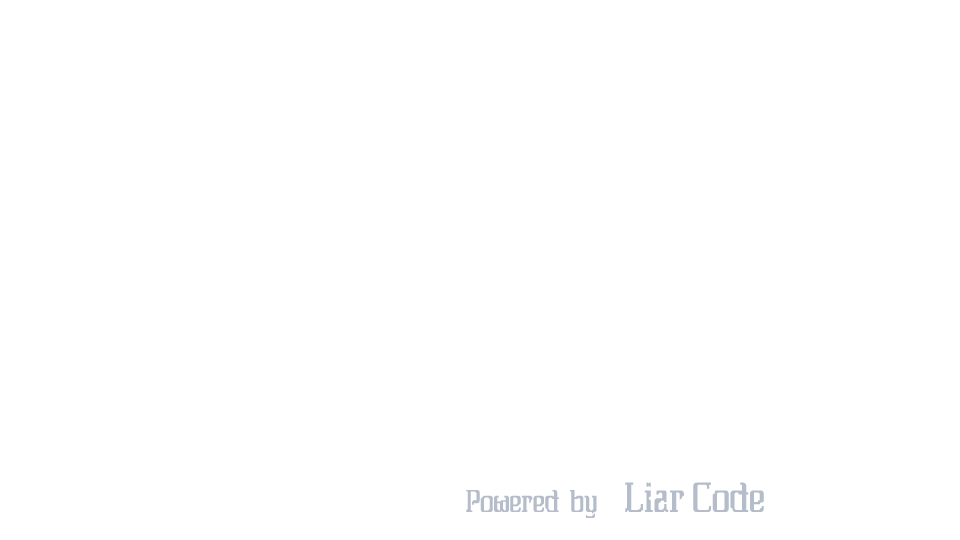
<style>
.page{position:relative;width:960px;height:540px;background:#ffffff}
.page>*{position:absolute;margin:0}
.t1{font:30px "Daybreaker";color:#b6becc}
.t2{font:50px "Daybreaker";color:#b6becc}
.t3{font:40px "Daybreaker";color:#b6becc}
</style>
<div class="page">
<p class="t1" style="left:466px;top:482px;width:298px;height:36px">Powered  by<span class="t2">  “</span><span class="t3">Liar Code</span></p>
</div>
